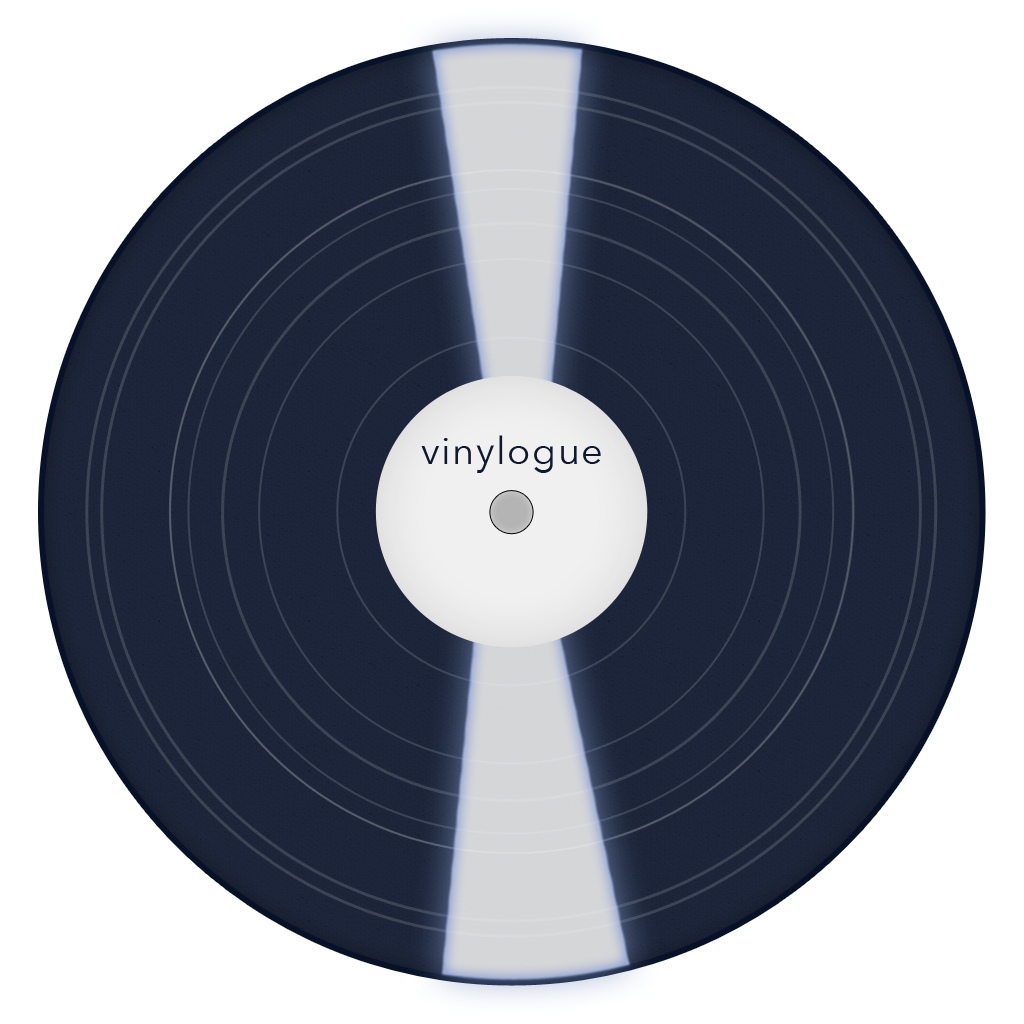
<style>
.page{position:relative;width:1024px;height:1024px;background:#ffffff}
.page>*{position:absolute;margin:0}
.t1{font:37.5px "AvenirNext-Regular";letter-spacing:0.05em;color:#0f182e}
</style>
<div class="page">
<p class="t1" style="left:421px;top:435px;width:180px;height:38px">vinylogue</p>
</div>
